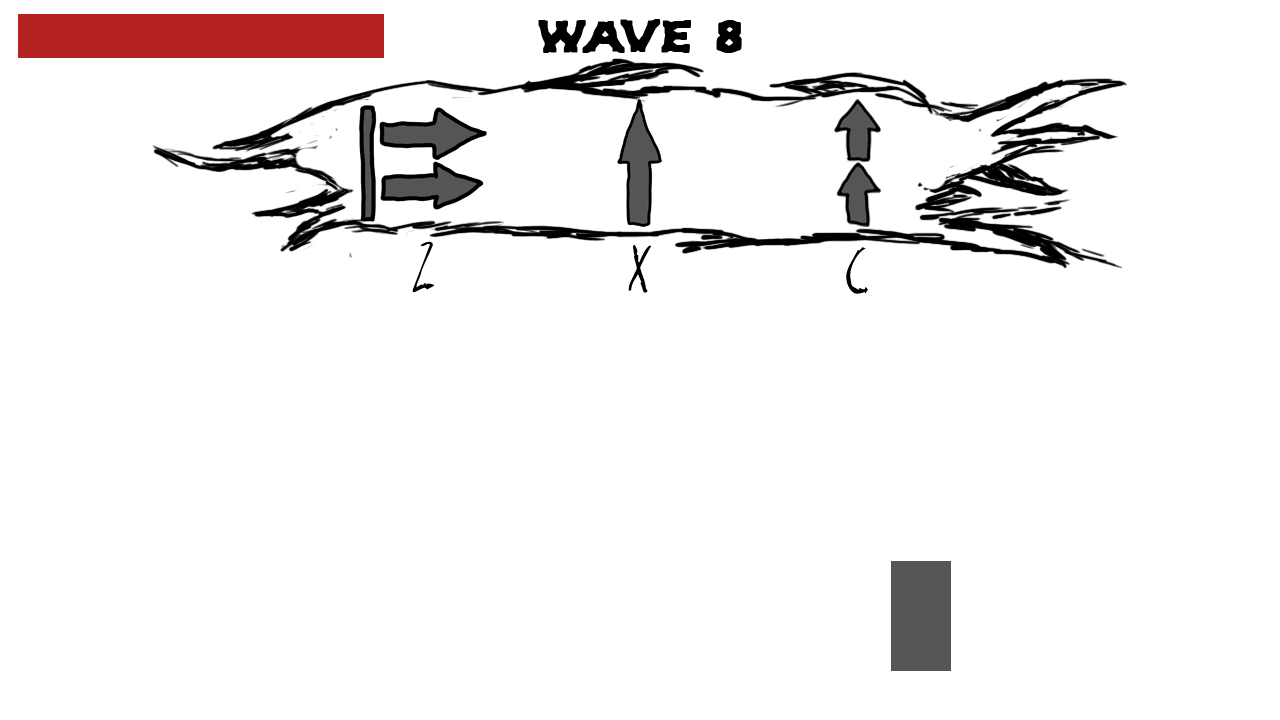
<style>
.page{position:relative;width:1280px;height:720px;background:#ffffff}
.page>*{position:absolute;margin:0}
.t1{font:48px "Hyde-BRK-";color:#000000}
.t2{font:60px "RazorKeen-Regular";color:#000000}
</style>
<div class="page">
<p class="t1" style="left:538px;top:19px;width:204px;height:34px">WAVE 8</p>
<p class="t2" style="left:412px;top:241px;width:22px;height:52px">Z</p>
<p class="t2" style="left:628px;top:244px;width:23px;height:49px">X</p>
<p class="t2" style="left:846px;top:247px;width:22px;height:47px">C</p>
</div>
